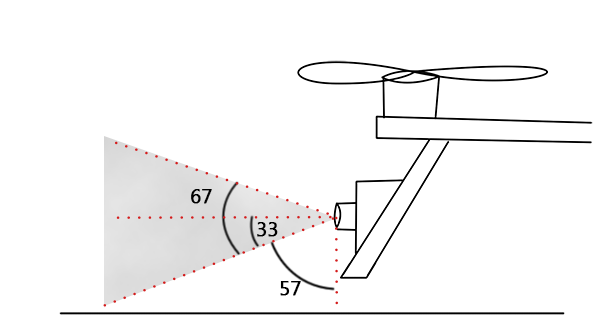
<style>
.page{position:relative;width:615px;height:331px;background:#ffffff}
.page>*{position:absolute;margin:0}
.t1{font:20px "MicrosoftTaiLe";color:#000000;font-weight:bold}
</style>
<div class="page">
<p class="t1" style="left:191px;top:189px;width:21px;height:15px">67</p>
<p class="t1" style="left:257px;top:222px;width:21px;height:15px">33</p>
<p class="t1" style="left:280px;top:281px;width:21px;height:15px">57</p>
</div>
